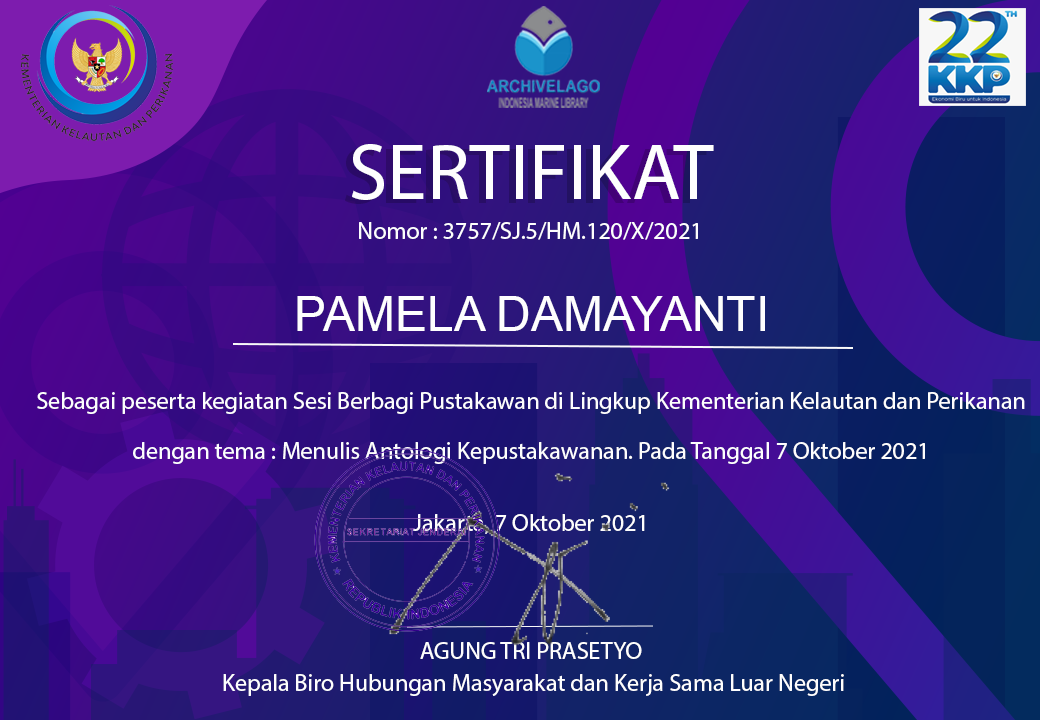
<style>
.page{position:relative;width:1040px;height:720px}
.page>*{position:absolute;margin:0}
.t1{font:80px "MyriadPro-Regular";color:#fefefe}
.t2{font:24px "MyriadPro-Regular";color:#fefefe}
.t3{font:48px "ArialMT";color:#fefefe}
</style>
<div class="page">
<p class="t1" style="left:352px;top:144px;width:362px;height:56px">SERTIFIKAT</p>
<p class="t2" style="left:359px;top:222px;width:339px;height:18px">Nomor : 3757/SJ.5/HM.120/X/2021</p>
<p class="t3" style="left:297px;top:296px;width:468px;height:35px">PAMELA DAMAYANTI</p>
<p class="t2" style="left:37px;top:392px;width:988px;height:22px">Sebagai peserta kegiatan Sesi Berbagi Pustakawan di Lingkup Kementerian Kelautan dan Perikanan</p>
<p class="t2" style="left:133px;top:442px;width:792px;height:22px">dengan tema : Menulis Antologi Kepustakawanan. Pada Tanggal 7 Oktober 2021</p>
<p class="t2" style="left:413px;top:514px;width:232px;height:20px">Jakarta, 7 Oktober 2021</p>
<p class="t2" style="left:420px;top:642px;width:222px;height:17px">AGUNG TRI PRASETYO</p>
<p class="t2" style="left:223px;top:674px;width:621px;height:22px">Kepala Biro Hubungan Masyarakat dan Kerja Sama Luar Negeri</p>
</div>
